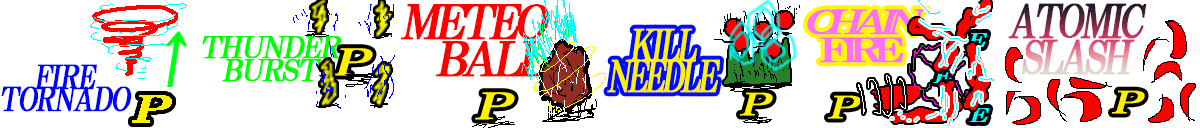
<style>
.page{position:relative;width:1200px;height:128px;background:#ffffff}
.page>*{position:absolute;margin:0}
.t1{font:47.2px/36.8px "HGPMinchoB";letter-spacing:-0.13em;color:#ff0000;font-weight:bold;font-style:italic;scale:1.07 1}
.t2{font:46.3px/35.1px "HGPMinchoB";letter-spacing:-0.11em;font-weight:bold;font-style:italic;scale:0.86 1}
.t3{font:33.2px/27.7px "HGPMinchoB";letter-spacing:-0.23em;color:#ff6ffa;font-weight:bold;font-style:italic;scale:1.6 1}
.t4{font:33.2px/27.7px "HGPMinchoB";letter-spacing:-0.23em;color:#ff6ffa;font-weight:bold;scale:1.6 1}
.t5{font:43.3px/30.4px "HGPMinchoB";letter-spacing:-0.13em;color:#fff100;font-weight:bold;font-style:italic;scale:0.8 1}
.t6{font:60.8px "HGPMinchoB";letter-spacing:-0.07em;color:#00ff12;font-weight:bold;font-style:italic;scale:0.89 1}
.t7{font:29.8px/23.2px "HGPMinchoB";letter-spacing:-0.07em;color:#00ff00;font-weight:bold;font-style:italic;scale:1.07 1}
.t8{font:19px "HGPMinchoB";letter-spacing:-0.23em;color:#00ffff;font-weight:bold;font-style:italic;scale:1.6 1}
.t9{font:36px "HGPMinchoB";letter-spacing:-0.07em;color:#fff100;font-weight:bold;font-style:italic;scale:1.6 1}
.t10{font:33px/21.6px "HGPMinchoB";letter-spacing:-0.07em;color:#0000ff;font-weight:bold;font-style:italic;scale:0.89 1}
.t11{font:19px "HGPMinchoB";letter-spacing:-0.23em;font-weight:bold;font-style:italic;scale:1.6 1}
.t12{font:30px "HGPMinchoB";letter-spacing:-0.23em;color:#fff100;font-weight:bold;font-style:italic;scale:1.6 1}
.t13{font:30px "HGPMinchoB";letter-spacing:-0.11em;color:#fff100;font-weight:bold;font-style:italic;scale:1.6 1}
</style>
<div class="page">
<p class="t1" style="left:401px;top:4px;width:148px;height:73px;text-align:right">METEO<br>BALL</p>
<p class="t2" style="left:1008px;top:3px;width:139px;height:72px;text-align:center">ATOMIC<br>SLASH</p>
<p class="t3" style="left:807px;top:9px;width:120px;height:54px;text-align:center">CHAIN<span class="t4"><br>FIRE</span></p>
<p class="t5" style="left:607px;top:28px;width:113px;height:65px;text-align:center">KILL<br>NEEDLE</p>
<p class="t6" style="left:166px;top:31px;width:21px;height:56px">↑</p>
<p class="t7" style="left:202px;top:36px;width:139px;height:46px;text-align:center">THUNDER<br>BURST</p>
<p class="t8" style="left:967px;top:33px;width:20px;height:14px">E</p>
<p class="t9" style="left:333px;top:48px;width:40px;height:28px">P</p>
<p class="t10" style="left:1px;top:64px;width:131px;height:48px;text-align:center">FIRE<br>TORNADO</p>
<p class="t11" style="left:933px;top:69px;width:20px;height:14px">E</p>
<p class="t9" style="left:475px;top:92px;width:40px;height:28px">P</p>
<p class="t12" style="left:740px;top:92px;width:33px;height:24px">P</p>
<p class="t12" style="left:828px;top:95px;width:33px;height:24px">P</p>
<p class="t13" style="left:1112px;top:90px;width:33px;height:24px">P</p>
<p class="t8" style="left:969px;top:108px;width:20px;height:14px">E</p>
</div>
